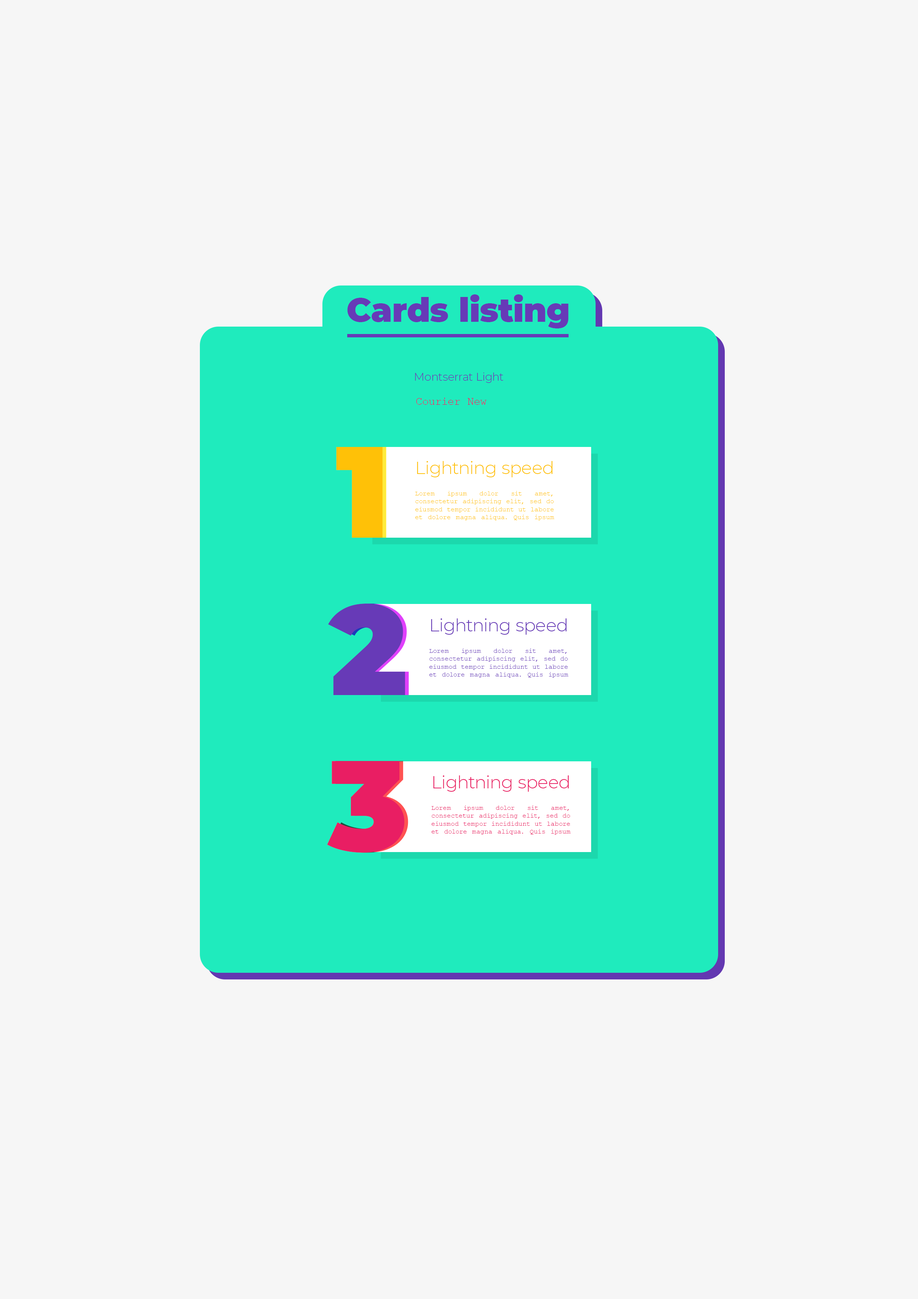
<style>
.page{position:relative;width:918px;height:1299px;background:#f6f6f6}
.page>*{position:absolute;margin:0}
.t1{font:33.3px "Montserrat-Black";color:#673ab7}
.t2{font:11.1px "Montserrat-Light";color:#673ab7}
.t3{font:11.1px "CourierNewPSMT";color:#e91e63}
.t4{font:129.6px "Montserrat-Black";color:#ffc107}
.t5{font:17.8px "Montserrat-Light";color:#ffc107}
.t6{font:6.7px "CourierNewPSMT";color:#ffc107}
.t7{font:127.7px "Montserrat-Black";color:#673ab7}
.t8{font:17.8px "Montserrat-Light";color:#673ab7}
.t9{font:6.7px "CourierNewPSMT";color:#673ab7}
.t10{font:127.8px "Montserrat-Black";color:#e91e63}
.t11{font:17.8px "Montserrat-Light";color:#e91e63}
.t12{font:6.7px "CourierNewPSMT";color:#e91e63}
</style>
<div class="page">
<p class="t1" style="left:347px;top:294px;width:222px;height:34px">Cards listing</p>
<p class="t2" style="left:415px;top:372px;width:89px;height:11px">Montserrat Light</p>
<p class="t3" style="left:416px;top:398px;width:70px;height:7px">Courier New</p>
<p class="t4" style="left:336px;top:447px;width:47px;height:91px">1</p>
<p class="t5" style="left:417px;top:461px;width:136px;height:16px">Lightning speed</p>
<p class="t6" style="left:415px;top:491px;width:139px;height:29px;text-align:justify">Lorem ipsum dolor sit amet, consectetur adipiscing elit, sed do eiusmod tempor incididunt ut labore et dolore magna aliqua. Quis ipsum suspendisse ultrices gravida. Risus commodo viverra maecenas accumsan lacus vel facilisis.</p>
<p class="t7" style="left:328px;top:603px;width:77px;height:92px">2</p>
<p class="t8" style="left:431px;top:618px;width:136px;height:17px">Lightning speed</p>
<p class="t9" style="left:429px;top:648px;width:139px;height:30px;text-align:justify">Lorem ipsum dolor sit amet, consectetur adipiscing elit, sed do eiusmod tempor incididunt ut labore et dolore magna aliqua. Quis ipsum suspendisse ultrices gravida. Risus commodo viverra maecenas accumsan lacus vel facilisis.</p>
<p class="t10" style="left:327px;top:761px;width:78px;height:92px">3</p>
<p class="t11" style="left:433px;top:775px;width:136px;height:17px">Lightning speed</p>
<p class="t12" style="left:432px;top:805px;width:139px;height:29px;text-align:justify">Lorem ipsum dolor sit amet, consectetur adipiscing elit, sed do eiusmod tempor incididunt ut labore et dolore magna aliqua. Quis ipsum suspendisse ultrices gravida. Risus commodo viverra maecenas accumsan lacus vel facilisis.</p>
</div>
